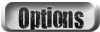
<style>
.page{position:relative;width:100px;height:32px}
.page>*{position:absolute;margin:0}
.t1{font:24px "YouAreLoved";color:#232323}
</style>
<div class="page">
<p class="t1" style="left:18px;top:6px;width:66px;height:25px">Options</p>
</div>
